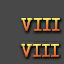
<style>
.page{position:relative;width:64px;height:64px;background:#484848}
.page>*{position:absolute;margin:0}
.t1{font:21.3px "RemingtonedType"}
</style>
<div class="page">
<p class="t1" style="left:21px;top:18px;width:39px;height:13px">VIII</p>
</div>
